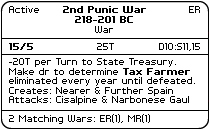
<style>
.page{position:relative;width:210px;height:130px;background:#ffffff}
.page>*{position:absolute;margin:0}
.t1{font:8px "PFTempestaSeven";color:#000000}
.t2{font:8px "PFTempestaSeven-Bold";color:#000000}
.t3{font:8px "PFTempestaSeven";color:#010101}
</style>
<div class="page">
<p class="t1" style="left:9px;top:6px;width:30px;height:7px">Active</p>
<p class="t2" style="left:63px;top:6px;width:83px;height:17px;text-align:center">2nd Punic War<br>218-201 BC</p>
<p class="t1" style="left:189px;top:6px;width:11px;height:7px">ER</p>
<p class="t1" style="left:95px;top:26px;width:18px;height:7px">War</p>
<p class="t2" style="left:9px;top:43px;width:24px;height:7px">15/5</p>
<p class="t1" style="left:97px;top:43px;width:17px;height:7px">25T</p>
<p class="t3" style="left:159px;top:43px;width:41px;height:8px">D10:S11,15</p>
<p class="t1" style="left:9px;top:58px;width:186px;height:47px">-20T per Turn to State Treasury.<br>Make dr to determine <span class="t2">Tax Farmer<br></span>eliminated every year until defeated.<br>Creates: Nearer &amp; Further Spain<br>Attacks: Cisalpine &amp; Narbonese Gaul</p>
<p class="t1" style="left:9px;top:114px;width:141px;height:10px">2 Matching Wars: ER(1), MR(1)</p>
</div>
